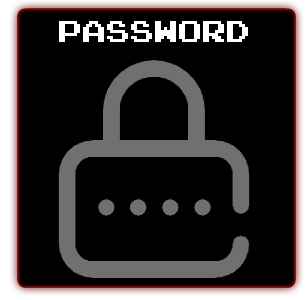
<style>
.page{position:relative;width:308px;height:300px;background:#000000}
.page>*{position:absolute;margin:0}
.t1{font:24px "Super-Mario-Bros.-NES";color:#ffffff}
</style>
<div class="page">
<p class="t1" style="left:59px;top:21px;width:189px;height:21px">PASSWORD</p>
</div>
